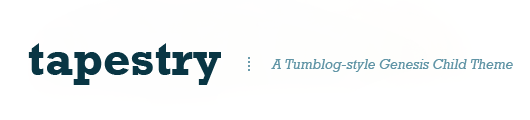
<style>
.page{position:relative;width:530px;height:120px;background:#ffffff}
.page>*{position:absolute;margin:0}
.t1{font:48px "Rockwell-Bold";color:#093644}
.t2{font:14px "Rockwell-Italic";color:#6195a6}
</style>
<div class="page">
<p class="t1" style="left:28px;top:43px;width:193px;height:42px">tapestry</p>
<p class="t2" style="left:271px;top:59px;width:242px;height:13px">A Tumblog-style Genesis Child Theme</p>
</div>
